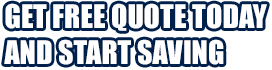
<style>
.page{position:relative;width:272px;height:70px;background:#ffffff}
.page>*{position:absolute;margin:0}
.t1{font:30px "Impact";letter-spacing:0.002em;color:#ffffff}
</style>
<div class="page">
<p class="t1" style="left:4px;top:3px;width:263px;height:62px">GET FREE QUOTE TODAY<br>AND START SAVING</p>
</div>
